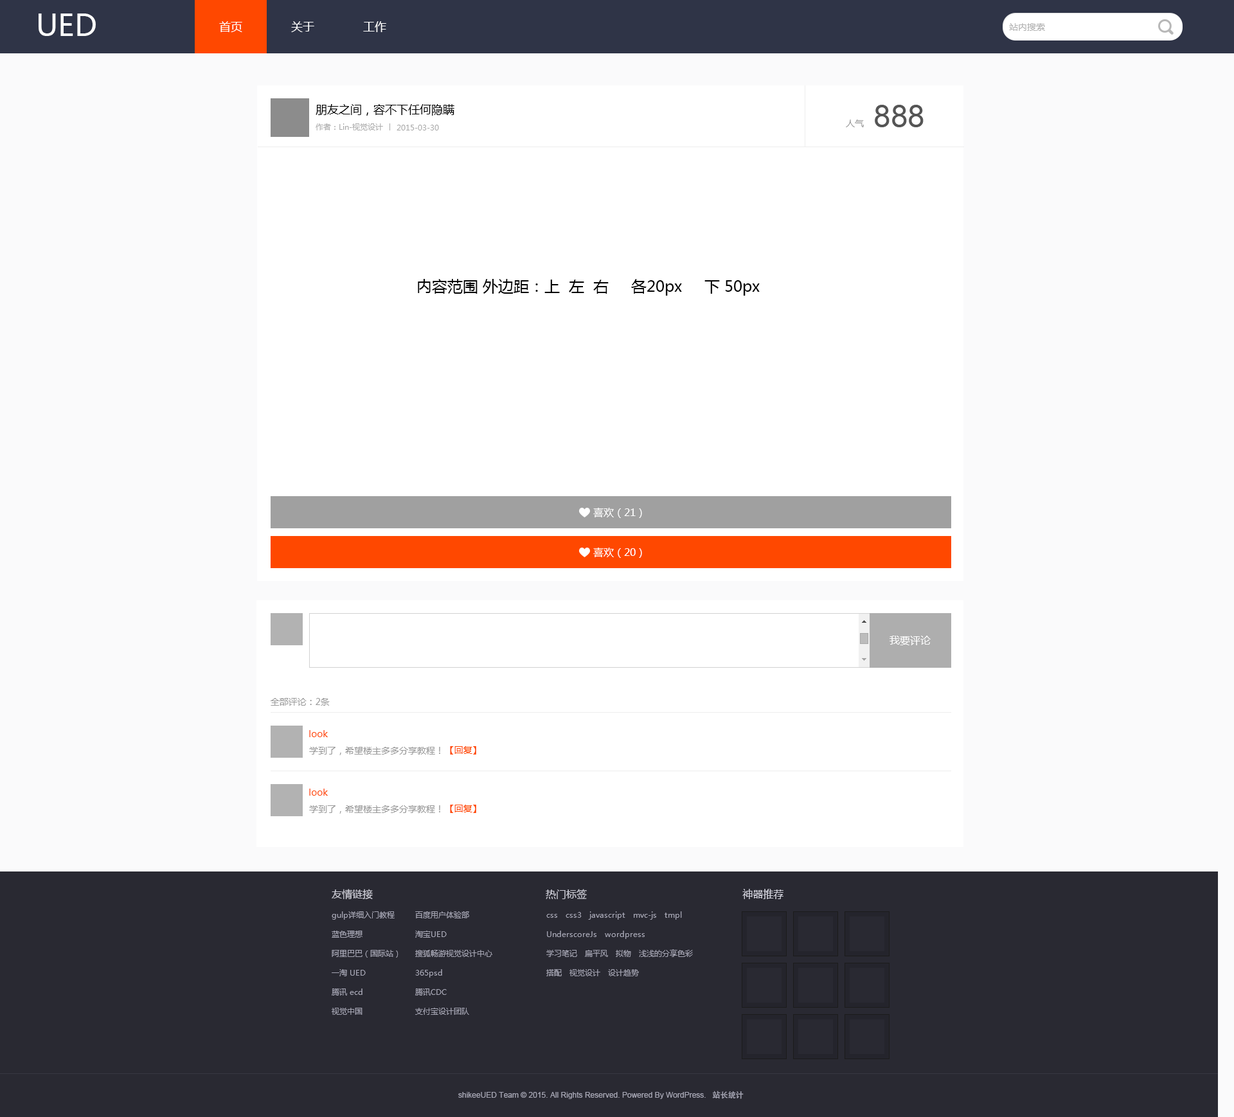
<style>
.page{position:relative;width:1234px;height:1117px;background:#fafafb}
.page>*{position:absolute;margin:0}
.t1{font:29.6px "MicrosoftYaHei";color:#ffffff}
.t2{font:11.6px "MicrosoftYaHei";color:#ffffff}
.t3{font:9px "MicrosoftYaHei";color:#b0b0b0}
.t4{font:11.6px "MicrosoftYaHei";color:#000000}
.t5{font:30.9px "ArialMT";color:#555555}
.t6{font:7.7px "MicrosoftYaHei";color:#aaaaaa}
.t7{font:9px "MicrosoftYaHei";color:#999999}
.t8{font:15.4px "MicrosoftYaHei";color:#000000}
.t9{font:10.3px "MicrosoftYaHei";color:#ffffff}
.t10{font:9px "MicrosoftYaHei";color:#ff4800}
.t11{font:10.3px "MicrosoftYaHei";color:#cfcfd9}
.t12{font:7.7px/19.3px "MicrosoftYaHei";color:#a5a5b3}
.t13{font:7.7px "ArialMT";color:#a5a5b3}
.t14{font:7.7px "AdobeHeitiStd-Regular";color:#a5a5b3}
</style>
<div class="page">
<p class="t1" style="left:39px;top:14px;width:57px;height:22px">UED</p>
<p class="t2" style="left:219px;top:21px;width:23px;height:11px">首页</p>
<p class="t2" style="left:291px;top:21px;width:23px;height:11px">关于</p>
<p class="t2" style="left:363px;top:21px;width:23px;height:11px">工作</p>
<p class="t3" style="left:1009px;top:23px;width:36px;height:8px">站内搜索</p>
<p class="t4" style="left:316px;top:104px;width:139px;height:12px">朋友之间，容不下任何隐瞒</p>
<p class="t5" style="left:875px;top:105px;width:49px;height:22px">888</p>
<p class="t6" style="left:316px;top:123px;width:67px;height:7px">作者：Lin-视觉设计</p>
<p class="t6" style="left:397px;top:125px;width:42px;height:5px">2015-03-30</p>
<p class="t7" style="left:846px;top:120px;width:18px;height:7px">人气</p>
<p class="t8" style="left:418px;top:279px;width:342px;height:17px">内容范围 外边距：上  左  右     各20px     下 50px</p>
<p class="t9" style="left:593px;top:508px;width:49px;height:10px">喜欢（21）</p>
<p class="t9" style="left:593px;top:548px;width:49px;height:10px">喜欢（20）</p>
<p class="t9" style="left:890px;top:636px;width:41px;height:9px">我要评论</p>
<p class="t7" style="left:271px;top:698px;width:59px;height:8px">全部评论：2条</p>
<p class="t10" style="left:309px;top:730px;width:19px;height:7px">look</p>
<p class="t7" style="left:309px;top:747px;width:131px;height:8px">学到了，希望楼主多多分享教程！</p>
<p class="t10" style="left:450px;top:746px;width:26px;height:9px">【回复】</p>
<p class="t10" style="left:309px;top:789px;width:19px;height:7px">look</p>
<p class="t7" style="left:309px;top:806px;width:131px;height:8px">学到了，希望楼主多多分享教程！</p>
<p class="t10" style="left:450px;top:805px;width:26px;height:8px">【回复】</p>
<p class="t11" style="left:332px;top:889px;width:41px;height:11px">友情链接</p>
<p class="t11" style="left:546px;top:889px;width:41px;height:10px">热门标签</p>
<p class="t11" style="left:742px;top:889px;width:42px;height:10px">神器推荐</p>
<p class="t12" style="left:332px;top:912px;width:67px;height:103px">gulp详细入门教程<br>蓝色理想<br>阿里巴巴（国际站）<br>一淘 UED<br>腾讯 ecd<br>视觉中国</p>
<p class="t12" style="left:415px;top:912px;width:77px;height:103px">百度用户体验部<br>淘宝UED<br>搜狐畅游视觉设计中心<br>365psd<br>腾讯CDC<br>支付宝设计团队</p>
<p class="t12" style="left:546px;top:912px;width:147px;height:65px">css   css3   javascript   mvc-js   tmpl<br>UnderscoreJs   wordpress   <br>学习笔记   扁平风   拟物   浅浅的分享色彩搭配   视觉设计   设计趋势</p>
<p class="t13" style="left:458px;top:1091px;width:286px;height:8px">shikeeUED Team © 2015. All Rights Reserved. Powered By WordPress.   <span class="t14">站长统计</span></p>
</div>
